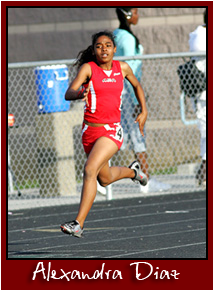
<style>
.page{position:relative;width:214px;height:291px}
.page>*{position:absolute;margin:0}
.t1{font:25px "BetinaScript";color:#ffffff}
</style>
<div class="page">
<p class="t1" style="left:32px;top:262px;width:148px;height:19px">Alexandra Diaz</p>
</div>
